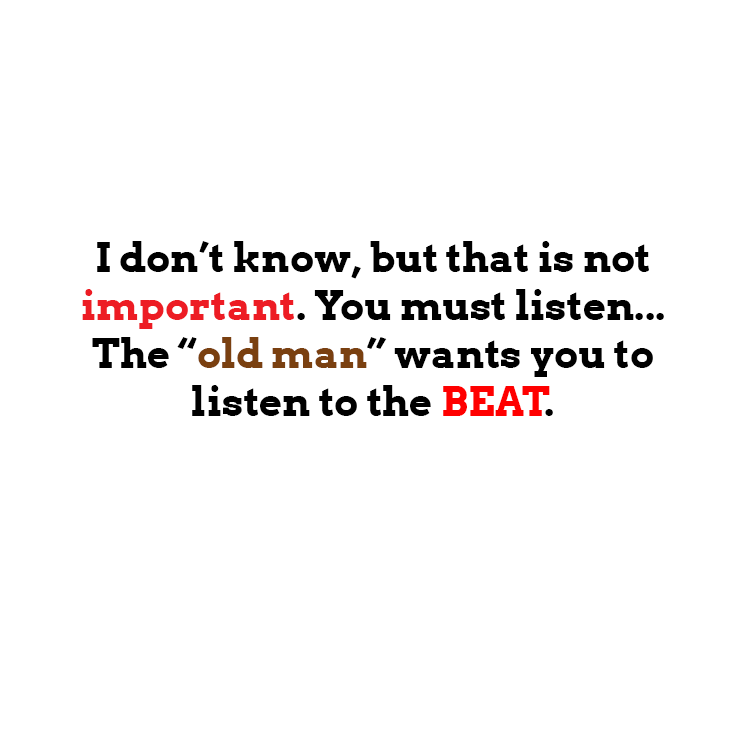
<style>
.page{position:relative;width:741px;height:741px;background:#ffffff}
.page>*{position:absolute;margin:0}
.t1{font:40px "Arvo-Bold";color:#000000}
.t2{font:40px "Arvo-Bold";color:#ed1c24}
.t3{font:40px "Arvo-Bold";color:#7a4010}
.t4{font:40px "Arvo-Bold";color:#ff0000}
</style>
<div class="page">
<p class="t1" style="left:82px;top:241px;width:582px;height:175px;text-align:center">I don’t know, but that is not <span class="t2">important</span>. You must listen... The “<span class="t3">old man</span>” wants you to listen to the <span class="t4">BEAT</span>.</p>
</div>
